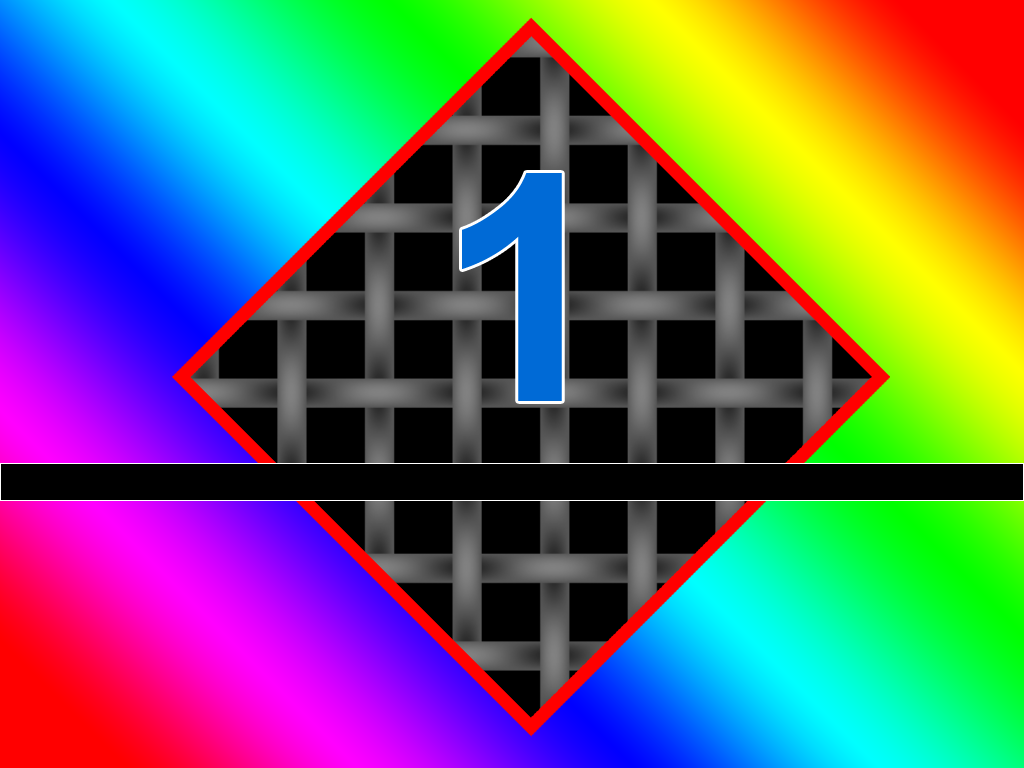
<style>
.page{position:relative;width:1024px;height:768px}
.page>*{position:absolute;margin:0}
.t1{font:317px "Arial-BoldMT";color:#006ad6}
</style>
<div class="page">
<p class="t1" style="left:462px;top:173px;width:100px;height:228px">1</p>
</div>
